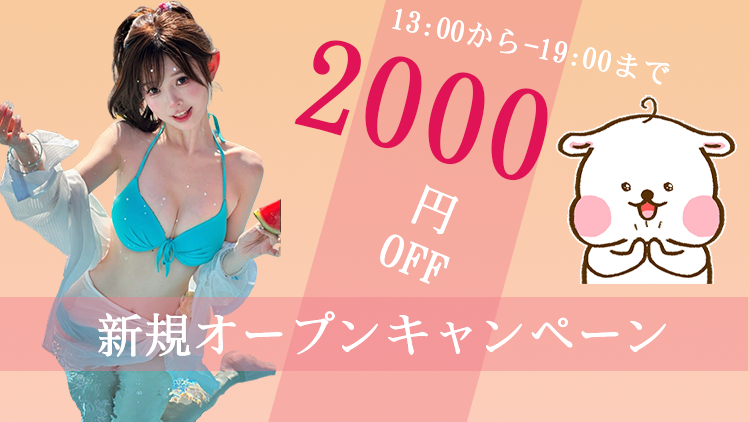
<style>
.page{position:relative;width:750px;height:422px}
.page>*{position:absolute;margin:0}
.t1{font:30px "SimSong-Bold";color:#ffffff}
.t2{font:130px "SimSong-Bold";color:#e11357}
.t3{font:46.6px/55px "SimSong-Bold";color:#ffffff}
.t4{font:46.6px/55px "SimSong-Bold";color:#79695c}
.t5{font:48px "SimSong-Bold";color:#ffffff}
</style>
<div class="page">
<p class="t1" style="left:392px;top:8px;width:278px;height:77px;rotate:12deg">13:00から-19:00まで</p>
<p class="t2" style="left:294px;top:40px;width:254px;height:141px;rotate:14deg">2000</p>
<p class="t3" style="left:380px;top:184px;width:79px;height:100px;text-align:center;rotate:22deg"><span class="t4"> </span>円<br> OFF</p>
<p class="t5" style="left:98px;top:311px;width:568px;height:46px">新規オープンキャンペーン</p>
</div>
